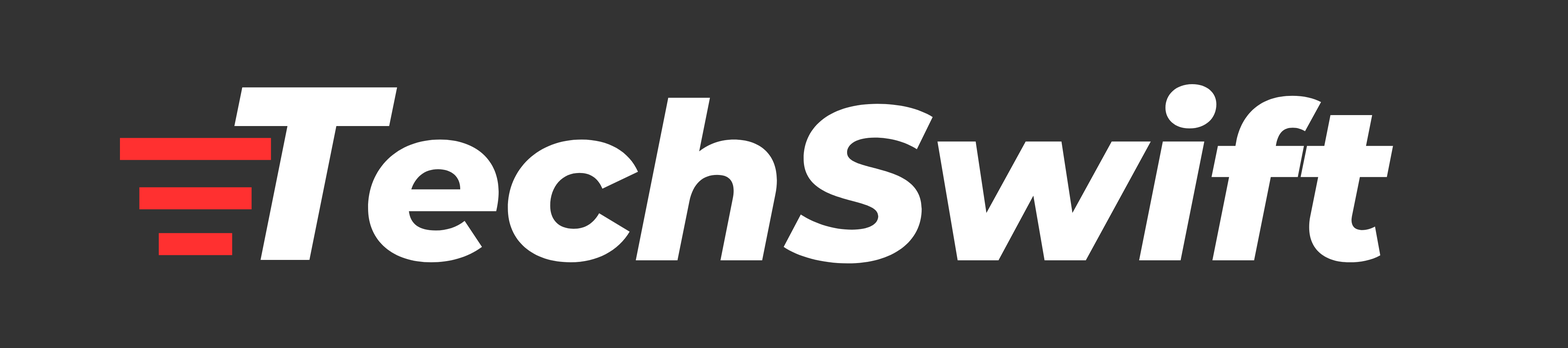
<style>
.page{position:relative;width:1568px;height:348px;background:#333333}
.page>*{position:absolute;margin:0}
.t1{font:246.9px "Montserrat-ExtraBoldItalic";color:#ffffff}
.t2{font:219.4px "Montserrat-ExtraBoldItalic";color:#ffffff}
</style>
<div class="page">
<p class="t1" style="left:234px;top:87px;width:163px;height:173px">T</p>
<p class="t2" style="left:368px;top:84px;width:1025px;height:180px">echSwift</p>
</div>
